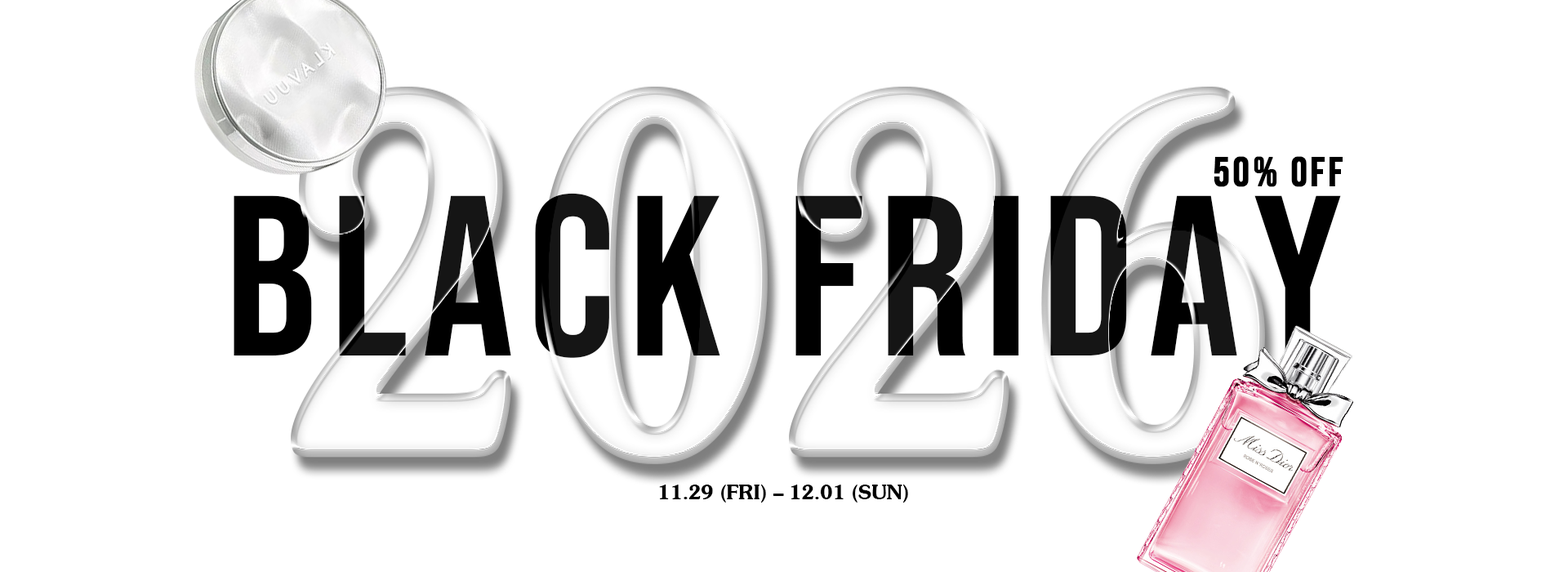
<style>
.page{position:relative;width:1568px;height:572px;background:#ffffff}
.page>*{position:absolute;margin:0}
.t1{font:40.8px "BebasNeue-Regular";letter-spacing:0.06em;color:#000000;font-weight:bold}
.t2{font:228px "BebasNeue-Regular";letter-spacing:0.06em;color:#000000}
.t3{font:20.4px "Souvenir-Bold";letter-spacing:-0.02em;color:#000000}
</style>
<div class="page">
<p class="t1" style="left:1214px;top:156px;width:129px;height:31px">50% OFF</p>
<p class="t2" style="left:234px;top:193px;width:1107px;height:165px">Black Friday</p>
<p class="t3" style="left:659px;top:484px;width:249px;height:18px">11.29 (FRI) – 12.01 (SUN)</p>
</div>
